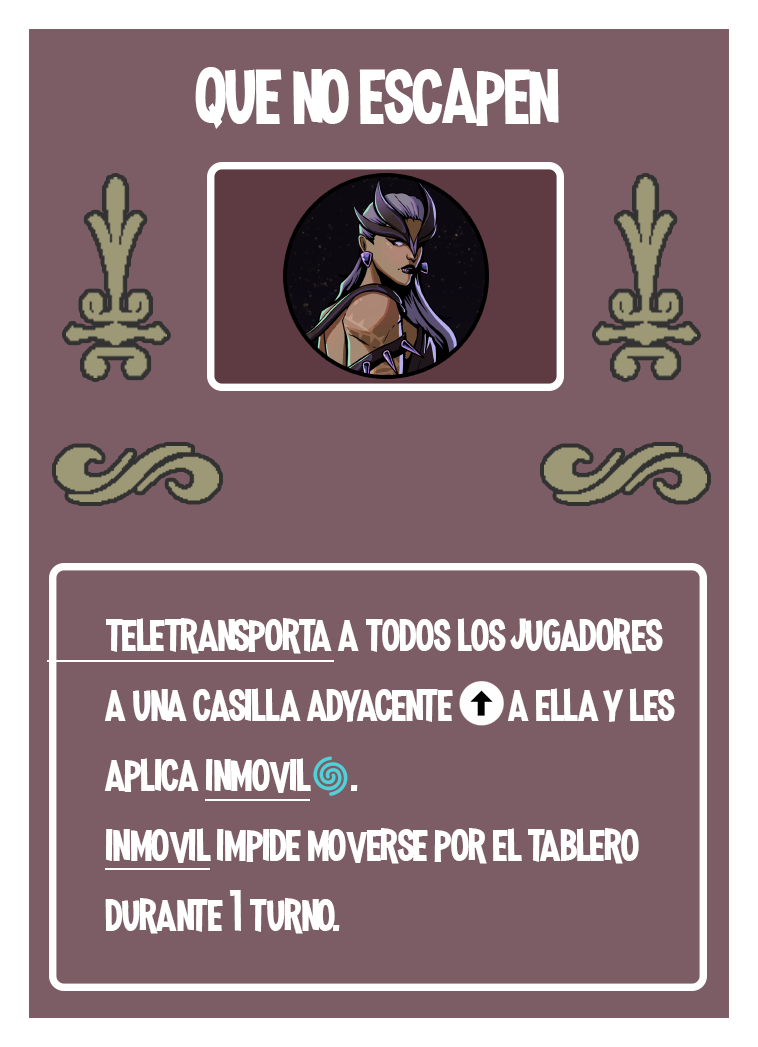
<style>
.page{position:relative;width:758px;height:1047px;background:#7d5d65}
.page>*{position:absolute;margin:0}
.t1{font:100px "MadnessHyperactive";color:#ffffff}
.t2{font:58.3px "MadnessHyperactive";color:#ffffff}
.t3{font:41.7px "EmojiOneColor";color:#ffffff}
</style>
<div class="page">
<p class="t1" style="left:195px;top:67px;width:364px;height:62px">que no escapen</p>
<p class="t2" style="left:104px;top:618px;width:571px;height:316px">teletransporta a todos los jugadores a una casilla adyacente       a ella y les aplica inmovil<span class="t3">🌀</span>.<br>inmovil impide moverse por el tablero durante 1 turno.</p>
</div>
